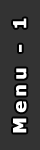
<style>
.page{position:relative;width:40px;height:150px;background:#333333}
.page>*{position:absolute;margin:0}
.t1{font:18px "Verdana-Bold";letter-spacing:0.2em;color:#ffffff;font-weight:bold}
</style>
<div class="page">
<p class="t1" style="left:13px;top:18px;width:14px;height:115px;rotate:-90deg">Menu - 1</p>
</div>
